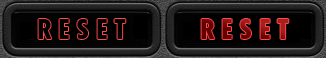
<style>
.page{position:relative;width:326px;height:58px;background:#000000}
.page>*{position:absolute;margin:0}
.t1{font:30px "TwCenMT-CondensedExtraBold";letter-spacing:0.2em}
</style>
<div class="page">
<p class="t1" style="left:201px;top:19px;width:88px;height:20px">RESET</p>
</div>
